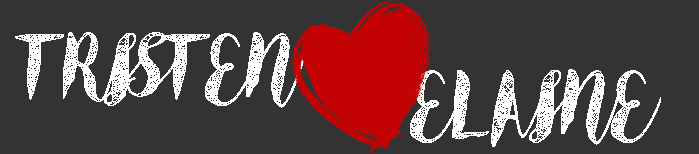
<style>
.page{position:relative;width:699px;height:154px;background:#333333}
.page>*{position:absolute;margin:0}
.t1{font:84.1px "AngelineVintage";color:#ffffff;scale:1.03 1}
</style>
<div class="page">
<p class="t1" style="left:15px;top:32px;width:289px;height:76px">TRISTEN</p>
<p class="t1" style="left:410px;top:69px;width:251px;height:78px">ELAINE</p>
</div>
